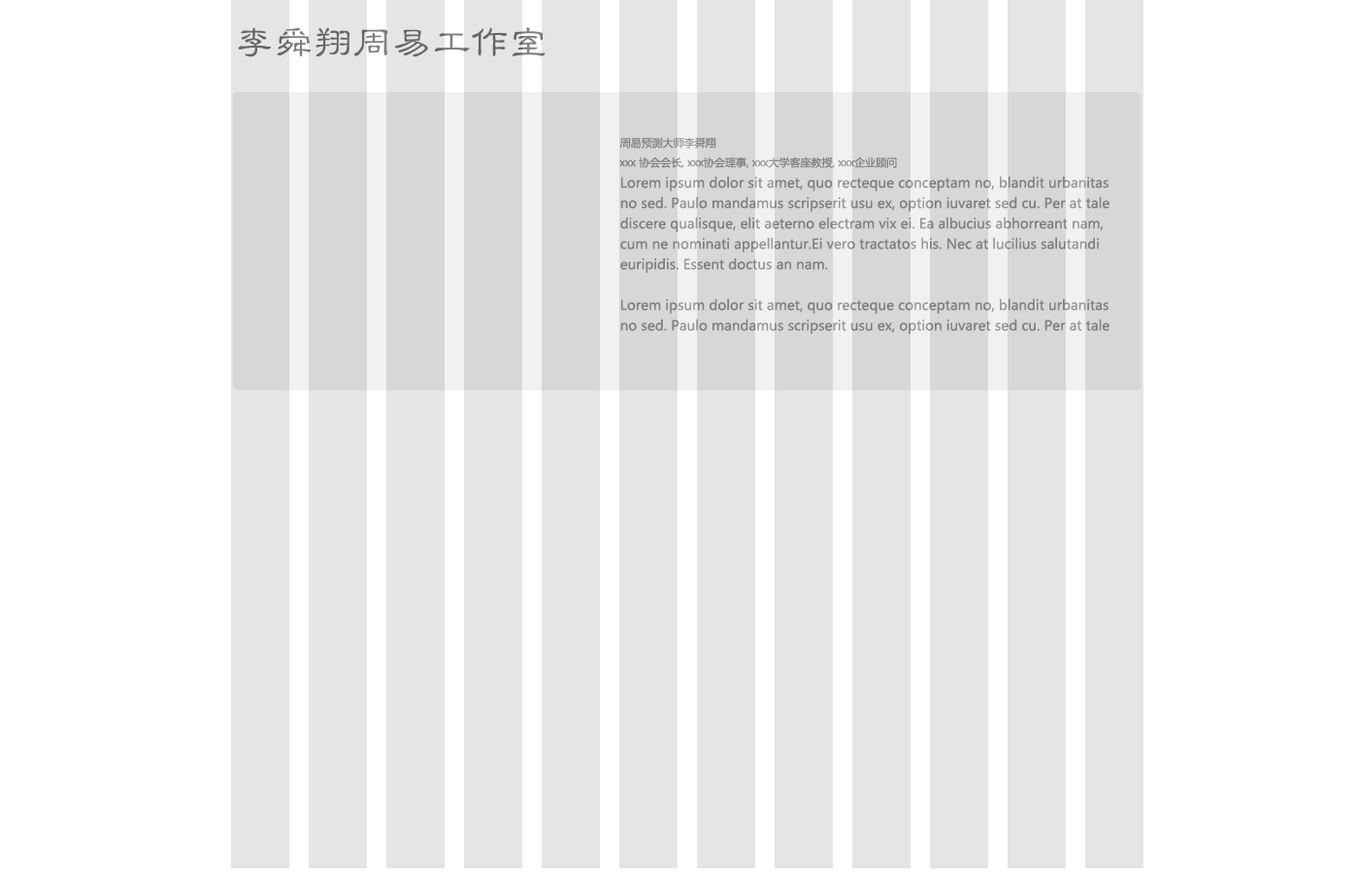
<style>
.page{position:relative;width:1358px;height:878px;background:#ffffff}
.page>*{position:absolute;margin:0}
.t1{font:41.6px "STLibian-SC-Regular"}
.t2{font:10.7px "MicrosoftYaHei"}
.t3{font:10.7px "MicrosoftYaHei";color:#808080}
.t4{font:13.6px/20.4px "MicrosoftYaHei";color:#808080}
</style>
<div class="page">
<p class="t1" style="left:238px;top:27px;width:308px;height:30px">李舜翔周易工作室</p>
<p class="t2" style="left:620px;top:137px;width:97px;height:12px">周易预测大师李舜翔</p>
<p class="t3" style="left:620px;top:156px;width:277px;height:12px">xxx 协会会长, xxx协会理事, xxx大学客座教授, xxx企业顾问</p>
<p class="t4" style="left:620px;top:176px;width:490px;height:158px">Lorem ipsum dolor sit amet, quo recteque conceptam no, blandit urbanitas no sed. Paulo mandamus scripserit usu ex, option iuvaret sed cu. Per at tale discere qualisque, elit aeterno electram vix ei. Ea albucius abhorreant nam, cum ne nominati appellantur.Ei vero tractatos his. Nec at lucilius salutandi euripidis. Essent doctus an nam. <br> <br>Lorem ipsum dolor sit amet, quo recteque conceptam no, blandit urbanitas no sed. Paulo mandamus scripserit usu ex, option iuvaret sed cu. Per at tale discere qualisque, elit aeterno electram vix ei. Ea albucius abhorreant nam, cum ne nominati appellantur.Ei vero tractatos his. Nec at lucilius salutandi euripidis. Essent doctus an nam. <br> Lorem ipsum dolor sit amet, quo recteque conceptam no, blandit urbanitas no sed. Paulo mandamus scripserit usu ex, option iuvaret sed cu.</p>
</div>
